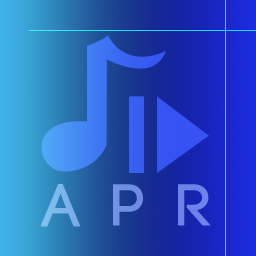
<style>
.page{position:relative;width:256px;height:256px}
.page>*{position:absolute;margin:0}
.t1{font:59.4px "Code-Bold";letter-spacing:0.08em;scale:1.06 1}
</style>
<div class="page">
<p class="t1" style="left:40px;top:184px;width:171px;height:43px">A P R</p>
</div>
